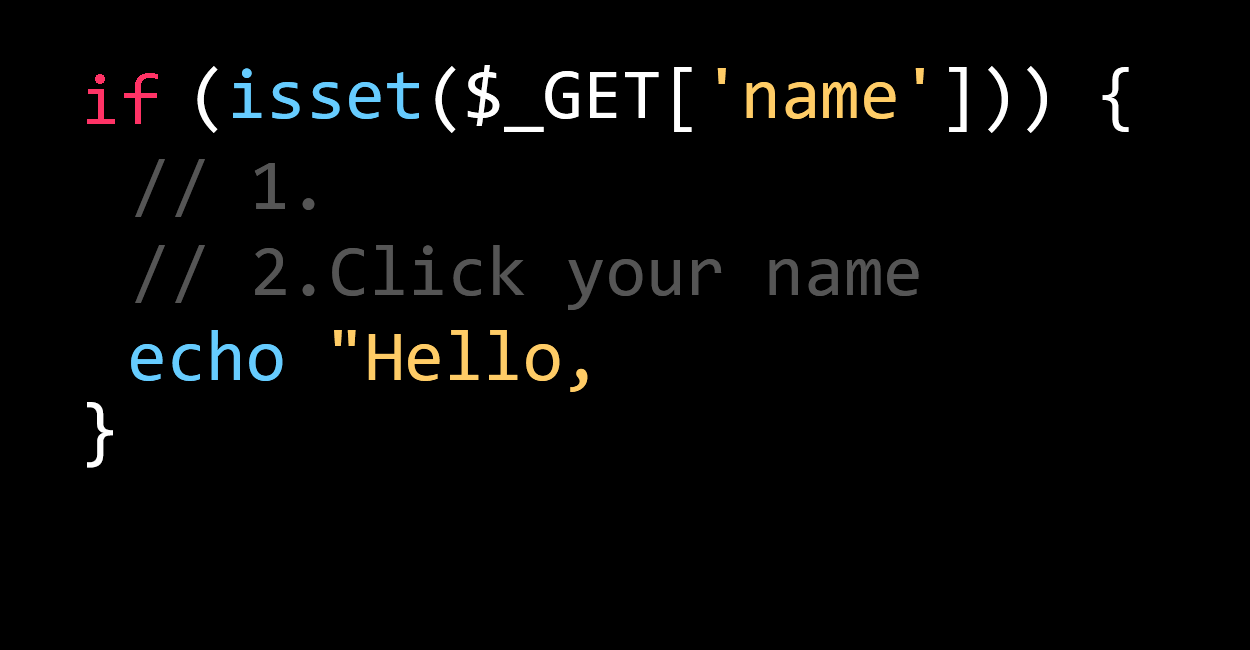
<style>
.page{position:relative;width:1250px;height:650px;background:#000000}
.page>*{position:absolute;margin:0}
.t1{font:72px "Consolas";color:#ffffff}
.t2{font:72px "Consolas";color:#66ccff}
.t3{font:72px "Consolas";color:#ffcc66}
.t4{font:72px "Consolas";color:#ff3366}
.t5{font:72px "Consolas";color:#555555}
</style>
<div class="page">
<p class="t1" style="left:197px;top:65px;width:932px;height:68px">(<span class="t2">isset</span>($_GET[<span class="t3">'name'</span>])) {</p>
<p class="t4" style="left:87px;top:73px;width:71px;height:51px">if</p>
<p class="t5" style="left:135px;top:159px;width:784px;height:151px">// 1. <br>// 2.Click your name</p>
<p class="t3" style="left:131px;top:330px;width:457px;height:62px"><span class="t2">echo </span>"Hello,</p>
<p class="t1" style="left:87px;top:402px;width:26px;height:66px">}</p>
</div>
